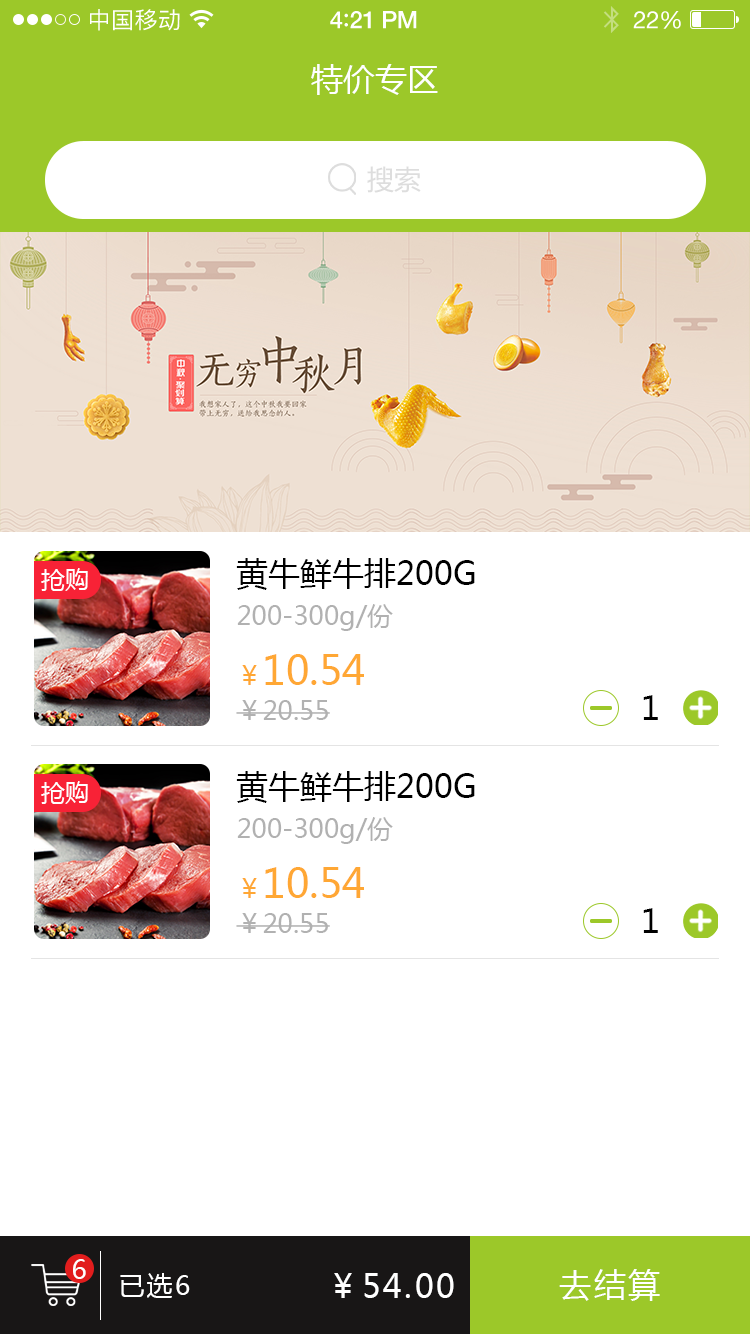
<style>
.page{position:relative;width:750px;height:1334px;background:#ffffff}
.page>*{position:absolute;margin:0}
.t1{font:23px "PingFangSC-Regular";letter-spacing:0.02em;color:#ffffff}
.t2{font:24px "HelveticaNeue-Medium";letter-spacing:-0.02em;color:#ffffff}
.t3{font:26px "Avenir-Medium";letter-spacing:-0.02em;color:#ffffff}
.t4{font:24px "HelveticaNeue";letter-spacing:-0.02em;color:#ffffff}
.t5{font:32px "MicrosoftYaHei";color:#ffffff;text-transform:uppercase}
.t6{font:26.9px "MicrosoftYaHei";color:#dddddd;text-transform:uppercase}
.t7{font:32px "MicrosoftYaHei";color:#000000;text-transform:uppercase}
.t8{font:24px "MicrosoftYaHei";color:#ffffff;text-transform:uppercase}
.t9{font:26px "MicrosoftYaHei";color:#b1b1b1}
.t10{font:40px "MicrosoftYaHei";color:#ffa734}
.t11{font:26px "MicrosoftYaHei";color:#ffa734}
.t12{font:32px "MicrosoftYaHei";letter-spacing:0.08em;color:#000000;text-transform:uppercase}
.t13{font:26px "MicrosoftYaHei";letter-spacing:0.08em;color:#ffffff;text-transform:uppercase}
.t14{font:32px "MicrosoftYaHei";letter-spacing:0.08em;color:#ffffff;text-transform:uppercase}
</style>
<div class="page">
<p class="t1" style="left:90px;top:9px;width:90px;height:22px">中国移动</p>
<p class="t2" style="left:330px;top:11px;width:87px;height:18px">4<span class="t3">:</span>21 PM</p>
<p class="t4" style="left:633px;top:11px;width:48px;height:18px">22%</p>
<p class="t5" style="left:311px;top:64px;width:127px;height:31px">特价专区</p>
<p class="t6" style="left:367px;top:166px;width:54px;height:27px">搜索</p>
<p class="t7" style="left:236px;top:558px;width:239px;height:32px">黄牛鲜牛排200g</p>
<p class="t8" style="left:41px;top:568px;width:47px;height:23px">抢购</p>
<p class="t9" style="left:237px;top:604px;width:156px;height:27px">200-300g/份</p>
<p class="t10" style="left:242px;top:654px;width:122px;height:31px"><span class="t11">￥</span>10.54</p>
<p class="t9" style="left:236px;top:700px;width:94px;height:20px">￥20.55</p>
<p class="t12" style="left:643px;top:695px;width:15px;height:25px">1</p>
<p class="t7" style="left:236px;top:771px;width:239px;height:32px">黄牛鲜牛排200g</p>
<p class="t8" style="left:41px;top:781px;width:47px;height:23px">抢购</p>
<p class="t9" style="left:237px;top:817px;width:156px;height:27px">200-300g/份</p>
<p class="t10" style="left:242px;top:867px;width:122px;height:31px"><span class="t11">￥</span>10.54</p>
<p class="t9" style="left:236px;top:913px;width:94px;height:20px">￥20.55</p>
<p class="t12" style="left:643px;top:908px;width:15px;height:25px">1</p>
<p class="t13" style="left:73px;top:1259px;width:13px;height:20px">6</p>
<p class="t13" style="left:120px;top:1273px;width:70px;height:25px">已选6</p>
<p class="t14" style="left:334px;top:1273px;width:120px;height:25px">￥54.00</p>
<p class="t14" style="left:559px;top:1269px;width:101px;height:32px">去结算</p>
</div>
